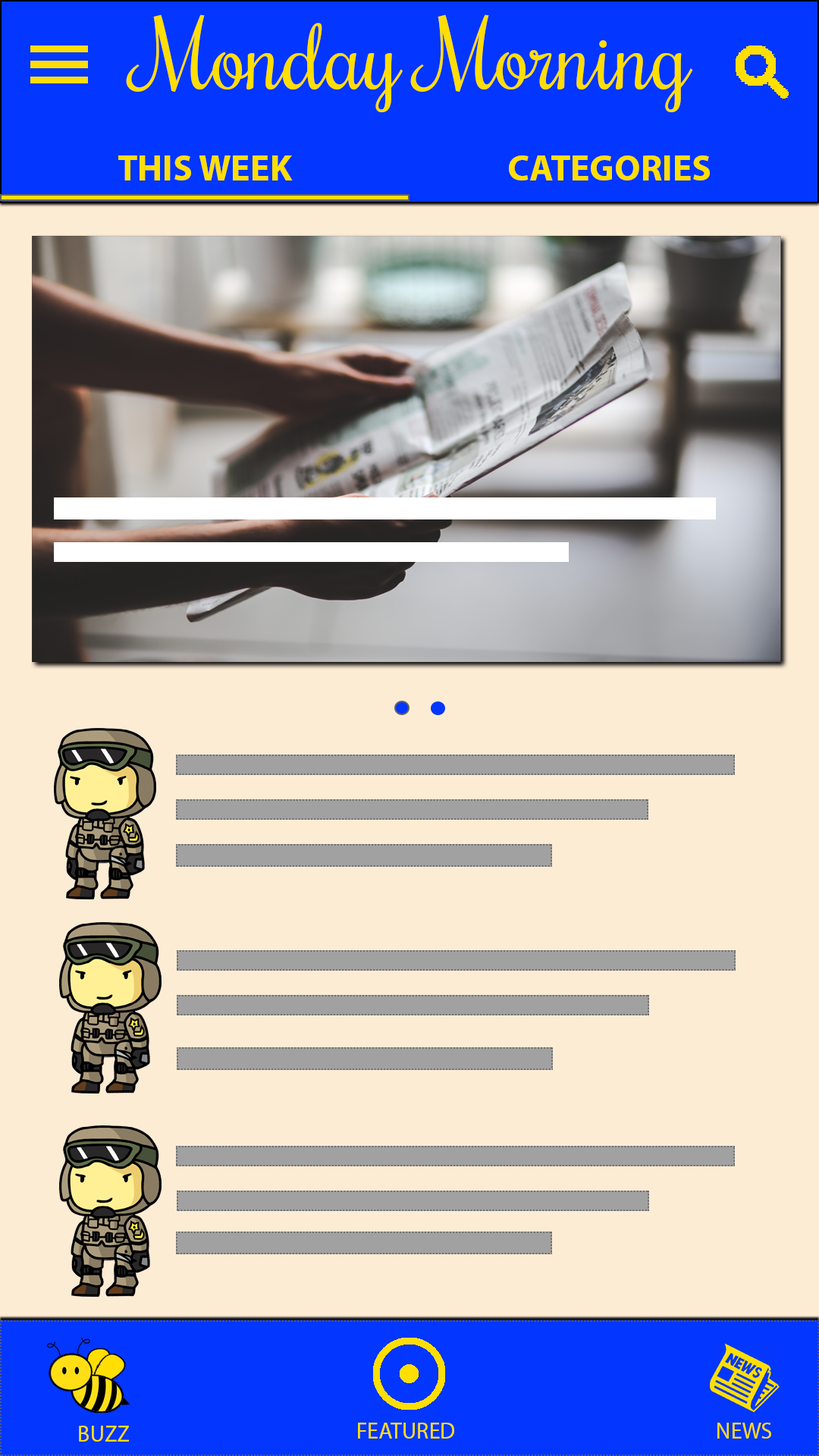
<style>
.page{position:relative;width:819px;height:1456px;background:#fdecd4}
.page>*{position:absolute;margin:0}
.t1{font:91px "Rochester-Regular";color:#ffde03}
.t2{font:36.4px "MyriadPro-Bold";color:#ffde03}
.t3{font:22.7px "MyriadPro-Regular";color:#ffde03}
</style>
<div class="page">
<p class="t1" style="left:126px;top:14px;width:567px;height:98px">Monday Morning</p>
<p class="t2" style="left:118px;top:155px;width:175px;height:25px">THIS WEEK</p>
<p class="t2" style="left:509px;top:155px;width:201px;height:25px">CATEGORIES</p>
<p class="t3" style="left:79px;top:1426px;width:50px;height:16px">BUZZ</p>
<p class="t3" style="left:358px;top:1423px;width:96px;height:16px">FEATURED</p>
<p class="t3" style="left:717px;top:1423px;width:54px;height:16px">NEWS</p>
</div>
